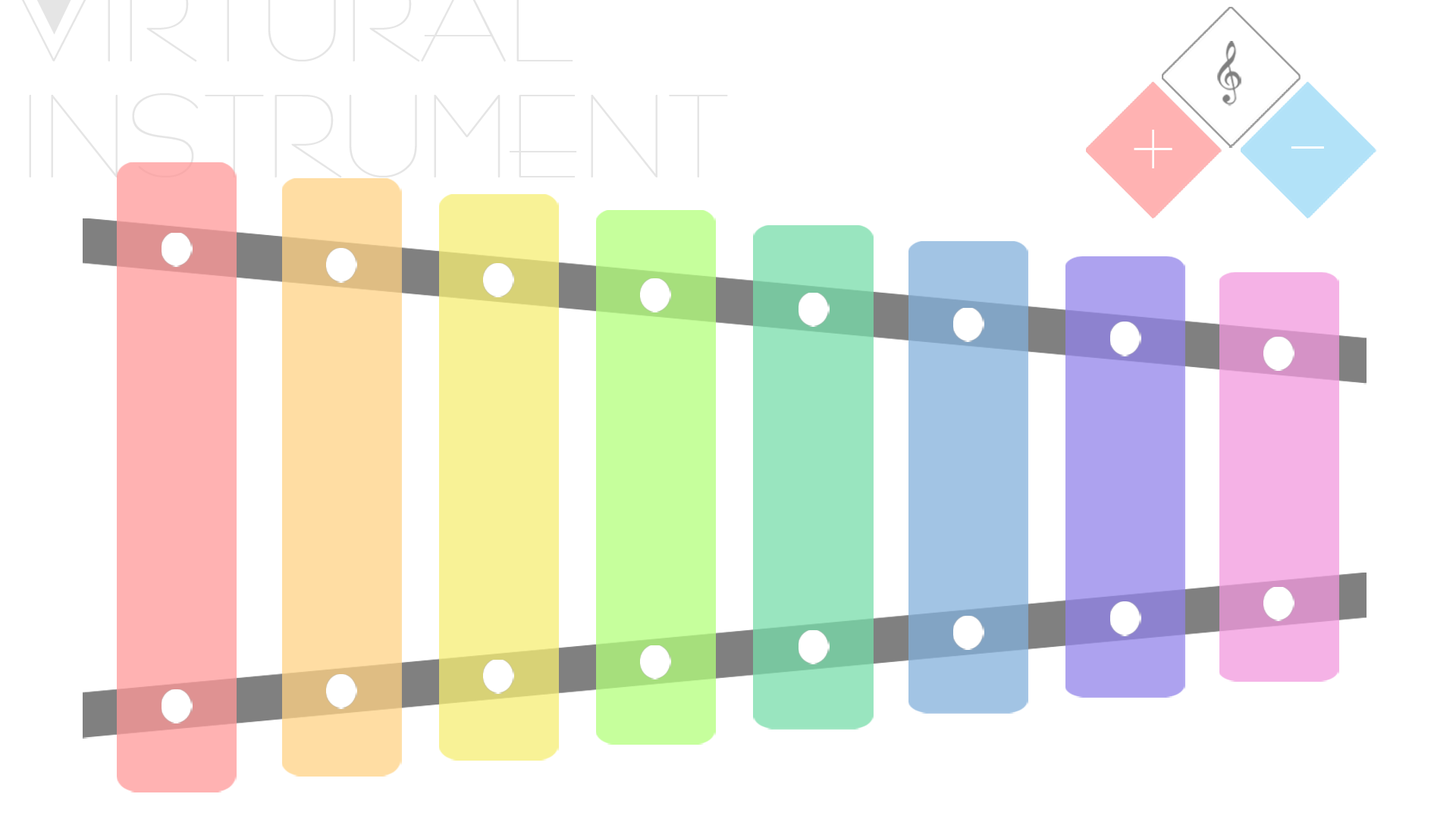
<style>
.page{position:relative;width:1456px;height:819px;background:#ffffff}
.page>*{position:absolute;margin:0}
.t1{font:91.4px "BernhardFashionBT-Regular";color:#e5e5e5}
.t2{font:64.8px "BernhardFashionBT-Regular";color:#ffffff}
</style>
<div class="page">
<p class="t1" style="left:29px;top:93px;width:699px;height:85px">INSTRUMENT</p>
<p class="t2" style="left:1134px;top:130px;width:38px;height:38px">+</p>
<p class="t2" style="left:1291px;top:146px;width:33px;height:3px">_</p>
</div>
